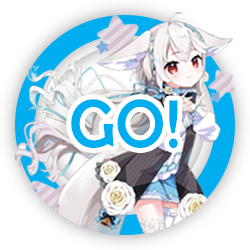
<style>
.page{position:relative;width:250px;height:250px;background:#ffffff}
.page>*{position:absolute;margin:0}
.t1{font:68.3px "BerlinSansFB-Reg";color:#00aeef}
</style>
<div class="page">
<p class="t1" style="left:71px;top:99px;width:107px;height:49px">GO!</p>
</div>
